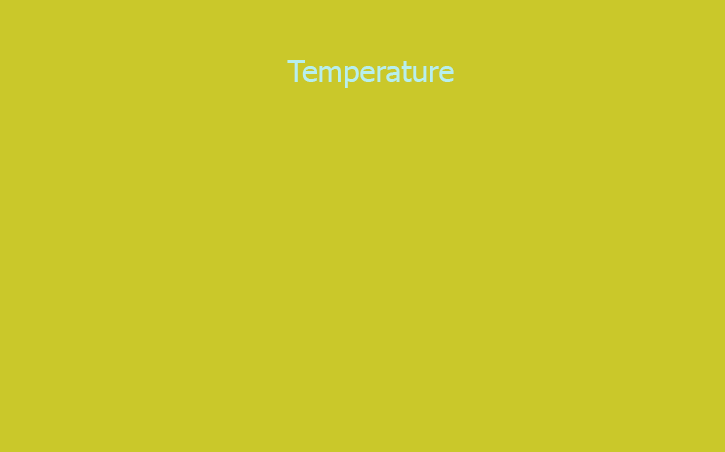
<style>
.page{position:relative;width:725px;height:452px;background:#cac82a}
.page>*{position:absolute;margin:0}
.t1{font:30px "Tahoma";color:#b7efed}
</style>
<div class="page">
<p class="t1" style="left:287px;top:60px;width:167px;height:28px">Temperature</p>
</div>
